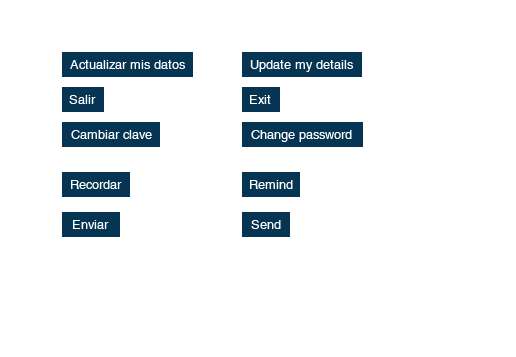
<style>
.page{position:relative;width:516px;height:357px;background:#ffffff}
.page>*{position:absolute;margin:0}
.t1{font:13px "Helvetica";color:#ffffff}
</style>
<div class="page">
<p class="t1" style="left:70px;top:60px;width:115px;height:9px">Actualizar mis datos</p>
<p class="t1" style="left:250px;top:60px;width:103px;height:12px">Update my details</p>
<p class="t1" style="left:69px;top:95px;width:27px;height:9px">Salir</p>
<p class="t1" style="left:250px;top:95px;width:21px;height:9px">Exit</p>
<p class="t1" style="left:71px;top:130px;width:81px;height:9px">Cambiar clave</p>
<p class="t1" style="left:251px;top:130px;width:101px;height:12px">Change password</p>
<p class="t1" style="left:71px;top:180px;width:51px;height:9px">Recordar</p>
<p class="t1" style="left:250px;top:180px;width:43px;height:9px">Remind</p>
<p class="t1" style="left:73px;top:220px;width:36px;height:9px">Enviar</p>
<p class="t1" style="left:251px;top:220px;width:30px;height:9px">Send</p>
</div>
